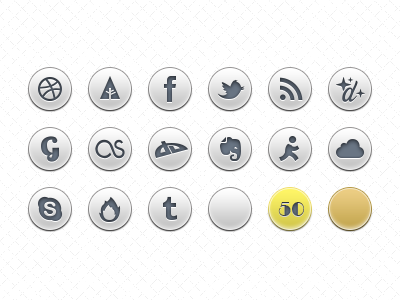
<style>
.page{position:relative;width:400px;height:300px;background:#ffffff}
.page>*{position:absolute;margin:0}
.t1{font:20px "Broadway";color:#49515d}
</style>
<div class="page">
<p class="t1" style="left:278px;top:202px;width:26px;height:14px">50</p>
</div>
